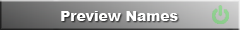
<style>
.page{position:relative;width:240px;height:30px}
.page>*{position:absolute;margin:0}
.t1{font:13.9px "Arial-Black";color:#ffffff}
</style>
<div class="page">
<p class="t1" style="left:61px;top:11px;width:117px;height:10px">Preview Names</p>
</div>
